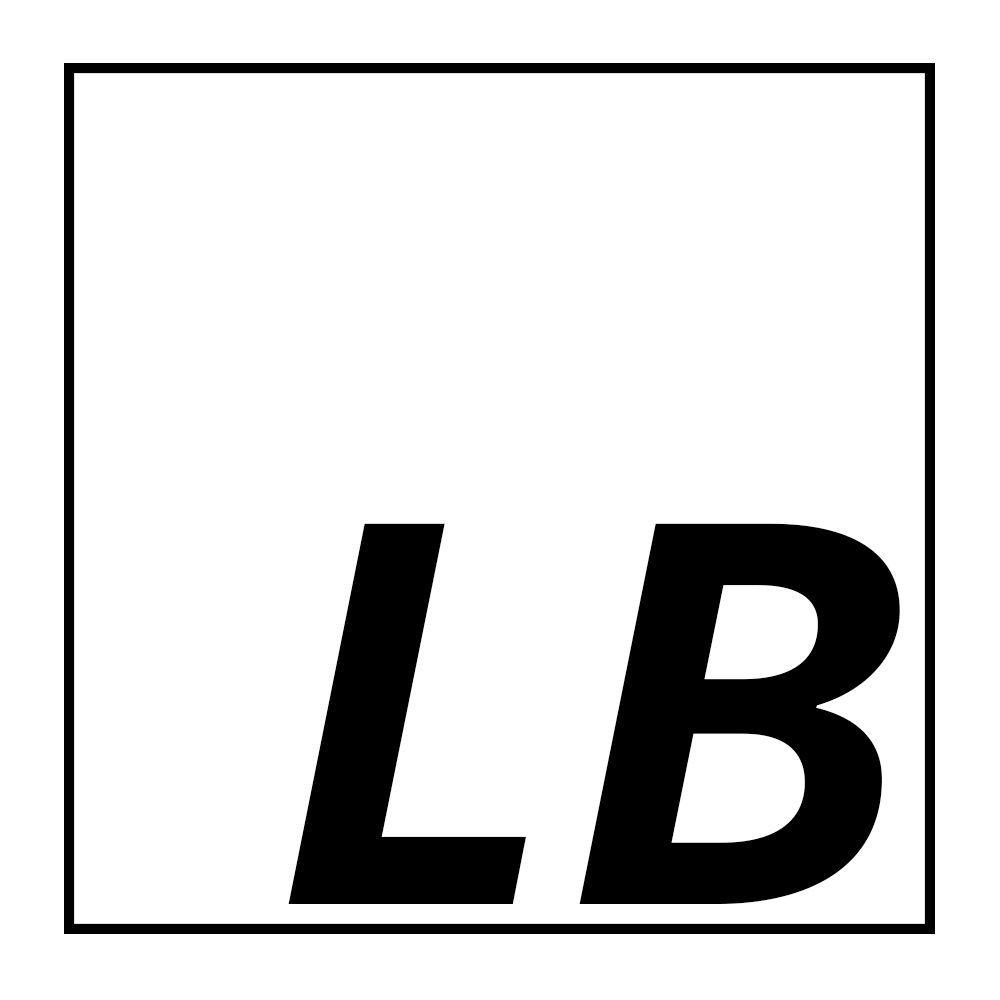
<style>
.page{position:relative;width:1000px;height:1000px;background:#ffffff}
.page>*{position:absolute;margin:0}
.t1{font:583.3px "SourceSansItalic-BoldItalic";color:#000000}
</style>
<div class="page">
<p class="t1" style="left:288px;top:523px;width:612px;height:381px">LB</p>
</div>
